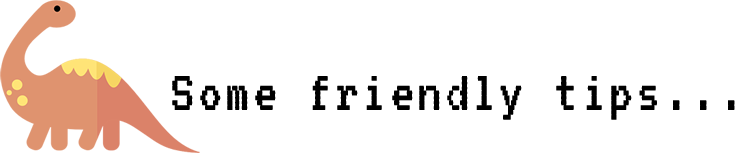
<style>
.page{position:relative;width:746px;height:153px;background:#ffffff}
.page>*{position:absolute;margin:0}
.t1{font:60.9px "VT323-Regular";letter-spacing:0.05em;color:#000000}
</style>
<div class="page">
<p class="t1" style="left:172px;top:76px;width:563px;height:44px">Some friendly tips...</p>
</div>
